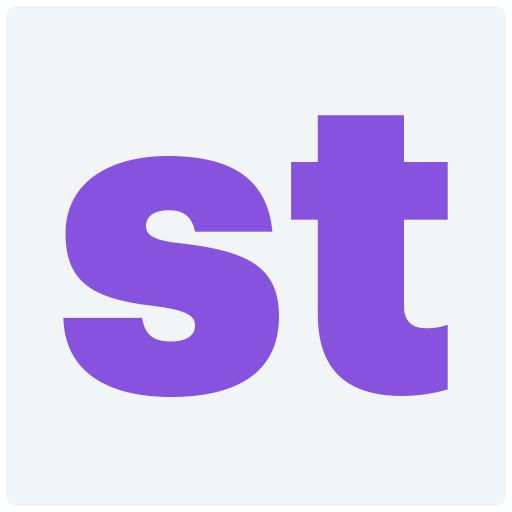
<style>
.page{position:relative;width:512px;height:512px;background:#f2f5f7}
.page>*{position:absolute;margin:0}
.t1{font:437.5px "Graphik-Black";color:#8753de}
</style>
<div class="page">
<p class="t1" style="left:63px;top:115px;width:385px;height:283px">st</p>
</div>
